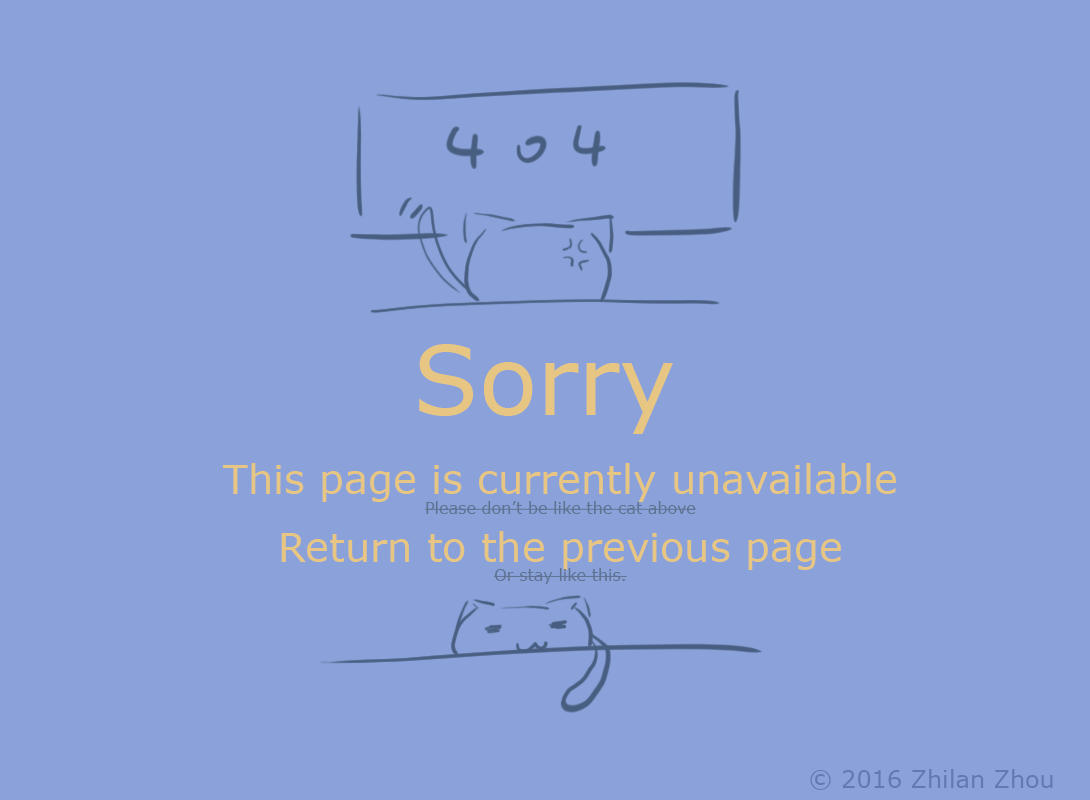
<style>
.page{position:relative;width:1090px;height:800px;background:#8aa2d9}
.page>*{position:absolute;margin:0}
.t1{font:96px "Verdana";color:#e7c683}
.t2{font:40px "Verdana";color:#e7c683}
.t3{font:16px "Verdana";color:#5e7292}
.t4{font:24px "Verdana";color:#637ab0}
</style>
<div class="page">
<p class="t1" style="left:419px;top:344px;width:254px;height:90px">Sorry</p>
<p class="t2" style="left:223px;top:463px;width:673px;height:121px;text-align:center">This page is currently unavailable<br><span class="t3">Please don’t be like the cat above<br></span>Return to the previous page<br><span class="t3">Or stay like this.</span></p>
<p class="t4" style="left:810px;top:769px;width:243px;height:21px">© 2016 Zhilan Zhou</p>
</div>
